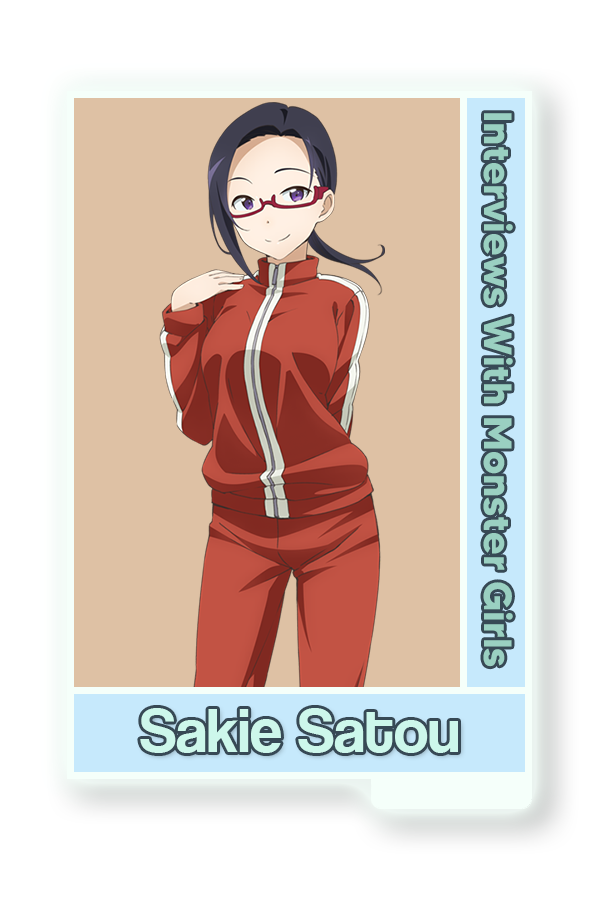
<style>
.page{position:relative;width:600px;height:900px;background:#dec1a4}
.page>*{position:absolute;margin:0}
.t1{font:39.2px "MADETOMMY-Bold";color:#9ad0c1}
.t2{font:64.4px "CoolveticaRg-Regular";color:#cdf7eb}
</style>
<div class="page">
<p class="t1" style="left:483px;top:113px;width:30px;height:554px;rotate:90deg">Interviews With Monster Girls</p>
<p class="t2" style="left:140px;top:708px;width:318px;height:45px">Sakie Satou</p>
</div>
